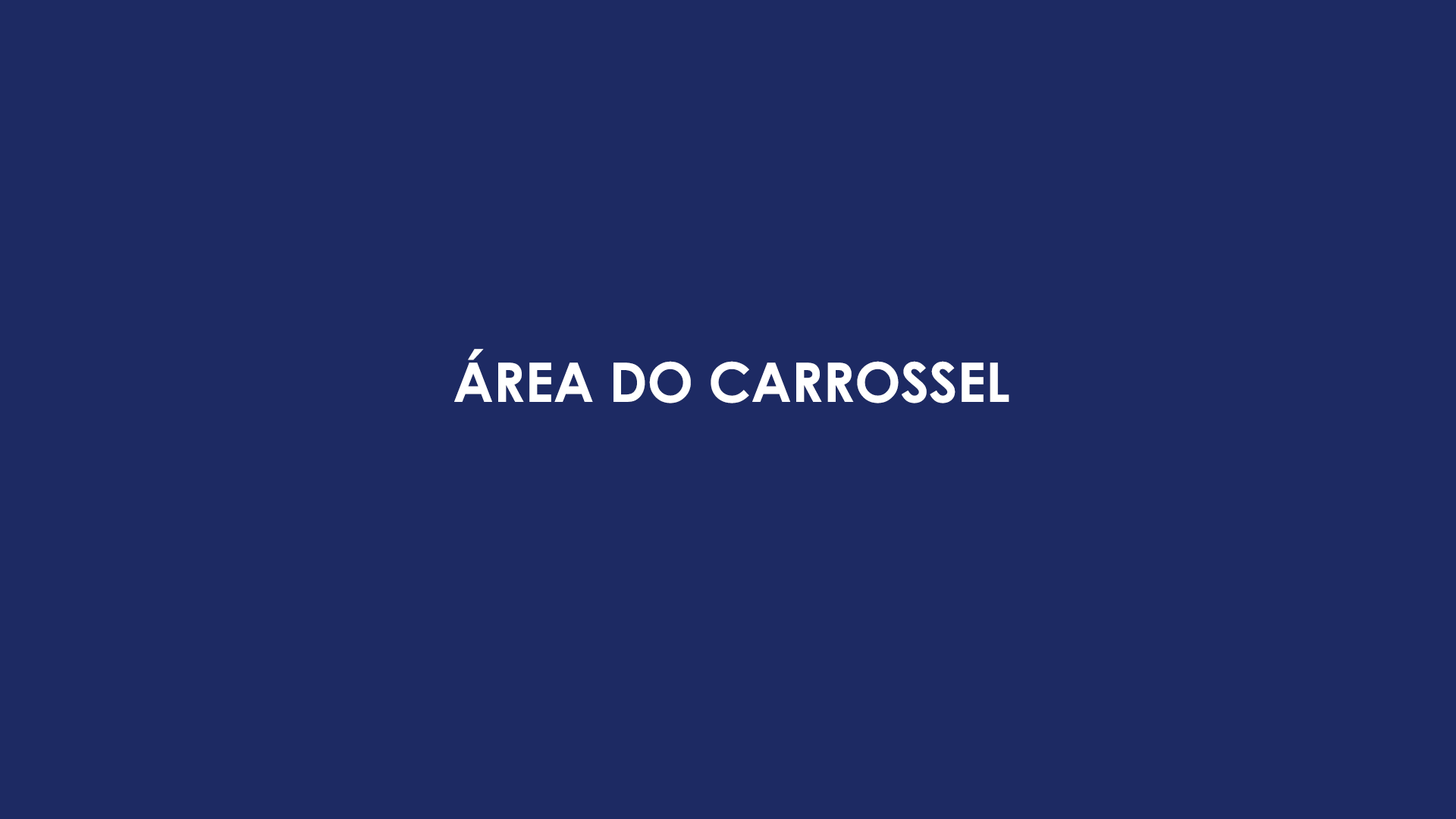
<style>
.page{position:relative;width:1456px;height:819px;background:#1d2a63}
.page>*{position:absolute;margin:0}
.t1{font:54.6px "CenturyGothic-Bold";color:#ffffff}
</style>
<div class="page">
<p class="t1" style="left:454px;top:349px;width:555px;height:54px">ÁREA DO CARROSSEL</p>
</div>
